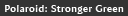
<style>
.page{position:relative;width:128px;height:16px;background:#333333}
.page>*{position:absolute;margin:0}
.t1{font:10px "AmiraParadiso";letter-spacing:0.05em;color:#ffffff}
</style>
<div class="page">
<p class="t1" style="left:5px;top:5px;width:119px;height:9px">Polaroid: Stronger Green</p>
</div>
